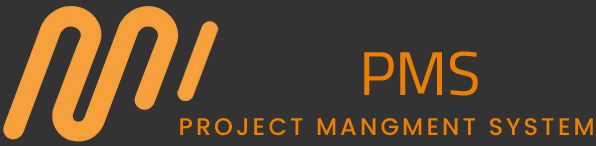
<style>
.page{position:relative;width:596px;height:146px;background:#333333}
.page>*{position:absolute;margin:0}
.t1{font:62px "Cairo-Regular";color:#ec7f00}
.t2{font:24px "Poppins-Medium";letter-spacing:0.13em;color:#ec7f00}
</style>
<div class="page">
<p class="t1" style="left:364px;top:51px;width:114px;height:45px">PMS</p>
<p class="t2" style="left:180px;top:118px;width:413px;height:18px">PROJECT MANGMENT SYSTEM</p>
</div>
